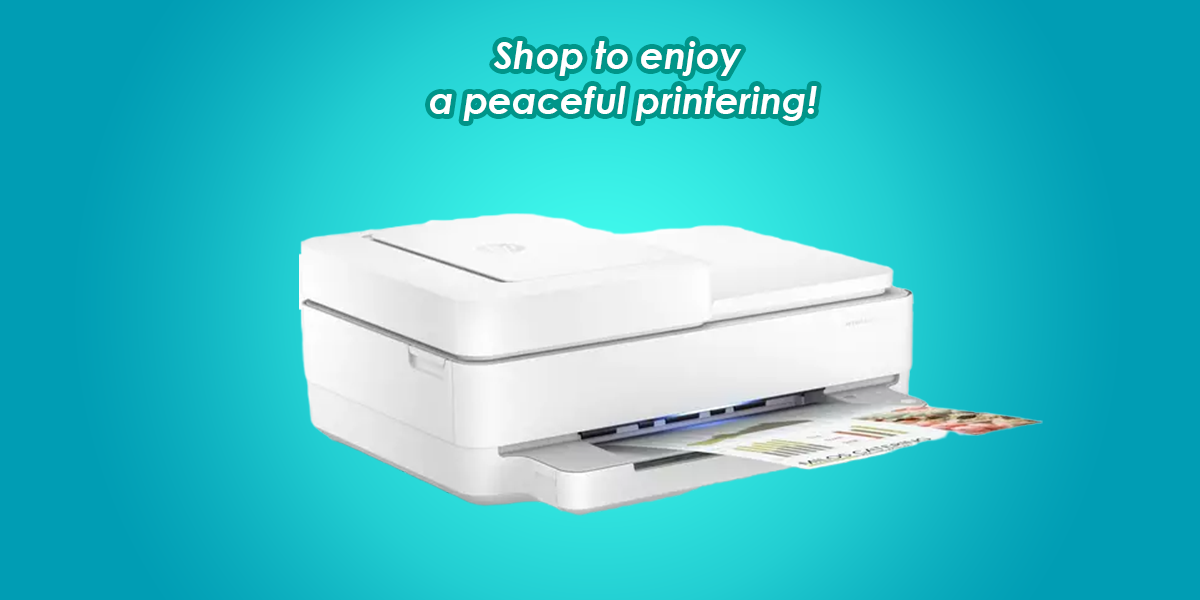
<style>
.page{position:relative;width:1200px;height:600px}
.page>*{position:absolute;margin:0}
.t1{font:37.3px "CenturyGothic-BoldItalic";color:#ffffff}
</style>
<div class="page">
<p class="t1" style="left:430px;top:41px;width:387px;height:80px;text-align:center">Shop to enjoy <br>a peaceful printering!</p>
</div>
